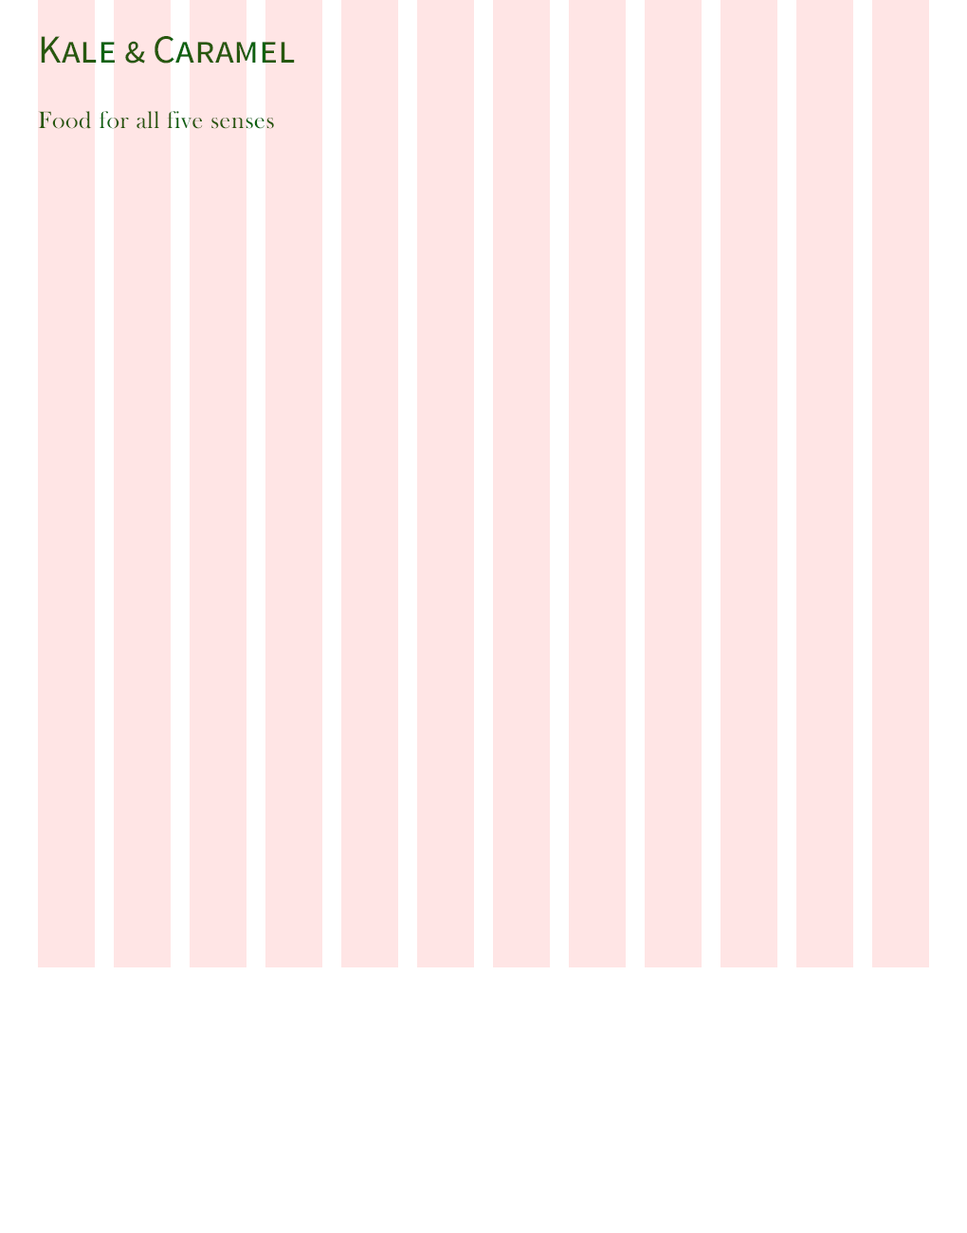
<style>
.page{position:relative;width:967px;height:1233px;background:#ffffff}
.page>*{position:absolute;margin:0}
.t1{font:39.8px "SourceSansPro-Regular";letter-spacing:-0.005em;color:#27580e;font-variant:small-caps}
.t2{font:24.7px "BaskOldFace";letter-spacing:0.025em;color:#27580e}
</style>
<div class="page">
<p class="t1" style="left:41px;top:36px;width:254px;height:28px">Kale &amp; Caramel</p>
<p class="t2" style="left:38px;top:111px;width:236px;height:18px">Food for all five senses</p>
</div>
